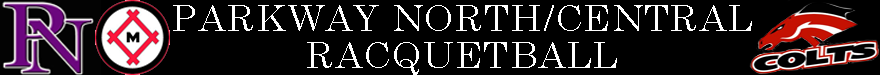
<style>
.page{position:relative;width:880px;height:75px;background:#000000}
.page>*{position:absolute;margin:0}
.t1{font:36px/37px "CenturySchoolbook";letter-spacing:0.025em;color:#ffffff;text-transform:uppercase;scale:1.07 1}
</style>
<div class="page">
<p class="t1" style="left:173px;top:5px;width:579px;height:70px;text-align:center">Parkway North/central<br>Racquetball</p>
</div>
